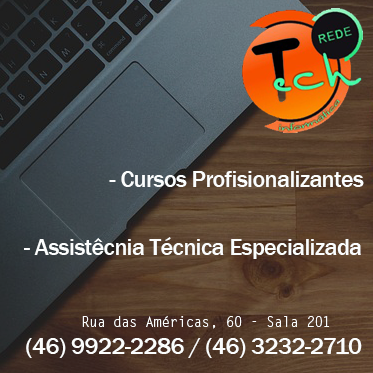
<style>
.page{position:relative;width:373px;height:373px}
.page>*{position:absolute;margin:0}
.t1{font:24px "FranklinGothic-Medium";letter-spacing:-0.025em;color:#fbfdfd}
.t2{font:14px "LetterGothicStd";letter-spacing:-0.025em;color:#fbfdfd}
</style>
<div class="page">
<p class="t1" style="left:109px;top:171px;width:255px;height:16px">- Cursos Profisionalizantes</p>
<p class="t1" style="left:24px;top:237px;width:337px;height:22px">- Assistêcnia Técnica Especializada</p>
<p class="t2" style="left:82px;top:316px;width:247px;height:13px">Rua das Américas, 60 - Sala 201</p>
<p class="t1" style="left:26px;top:338px;width:336px;height:20px">(46) 9922-2286 / (46) 3232-2710</p>
</div>
